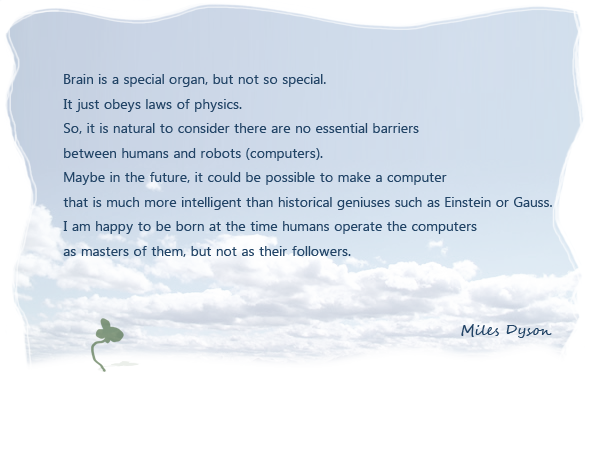
<style>
.page{position:relative;width:600px;height:450px;background:#ffffff}
.page>*{position:absolute;margin:0}
.t1{font:14px "SegoeUI";letter-spacing:0.05em;color:#224466}
.t2{font:14px "SegoeScript";letter-spacing:0.05em;color:#224466}
</style>
<div class="page">
<p class="t1" style="left:63px;top:74px;width:489px;height:183px">Brain is a special organ, but not so special.<br>It just obeys laws of physics.<br>So, it is natural to consider there are no essential barriers <br>between humans and robots (computers).<br>Maybe in the future, it could be possible to make a computer<br>that is much more intelligent than historical geniuses such as Einstein or Gauss.<br>I am happy to be born at the time humans operate the computers <br>as masters of them, but not as their followers.</p>
<p class="t2" style="left:461px;top:324px;width:91px;height:14px">Miles Dyson</p>
</div>
